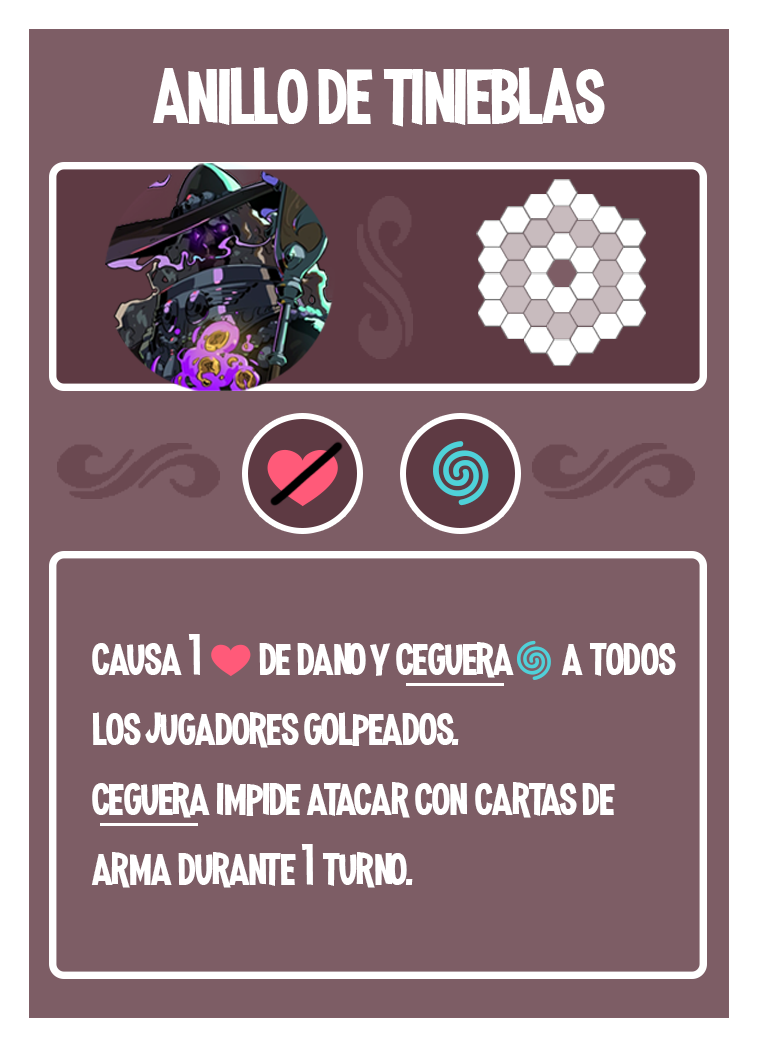
<style>
.page{position:relative;width:758px;height:1047px;background:#7d5d65}
.page>*{position:absolute;margin:0}
.t1{font:100px "MadnessHyperactive";color:#ffffff}
.t2{font:58.3px "MadnessHyperactive";color:#ffffff}
.t3{font:41.7px "EmojiOneColor";color:#ffffff}
</style>
<div class="page">
<p class="t1" style="left:153px;top:67px;width:452px;height:60px">anillo de tinieblas</p>
<p class="t2" style="left:91px;top:634px;width:585px;height:254px">causa 1 <span class="t3">❤️ </span>de dano y ceguera<span class="t3">🌀</span> a todos los jugadores golpeados.<br>ceguera impide atacar con cartas de arma durante 1 turno.</p>
</div>
